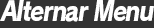
<style>
.page{position:relative;width:154px;height:28px;background:#333333}
.page>*{position:absolute;margin:0}
.t1{font:26.7px "RodinPro-EB";letter-spacing:-0.065em;color:#ffffff;font-style:italic;scale:0.85 1}
</style>
<div class="page">
<p class="t1" style="left:0px;top:0px;width:154px;height:22px">Alternar Menu</p>
</div>
